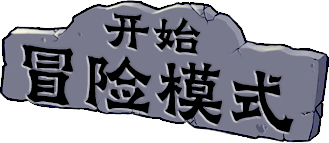
<style>
.page{position:relative;width:329px;height:143px;background:#ffffff}
.page>*{position:absolute;margin:0}
.t1{font:50.5px "GraveBustedStoneLishuSCRoughlyC";color:#000000;scale:1.11 1}
.t2{font:80.3px "GraveBustedStoneLishuSCRoughlyC";color:#000000}
</style>
<div class="page">
<p class="t1" style="left:104px;top:13px;width:97px;height:41px;rotate:4deg">开始</p>
<p class="t2" style="left:22px;top:44px;width:272px;height:89px;rotate:7deg">冒险模式</p>
</div>
